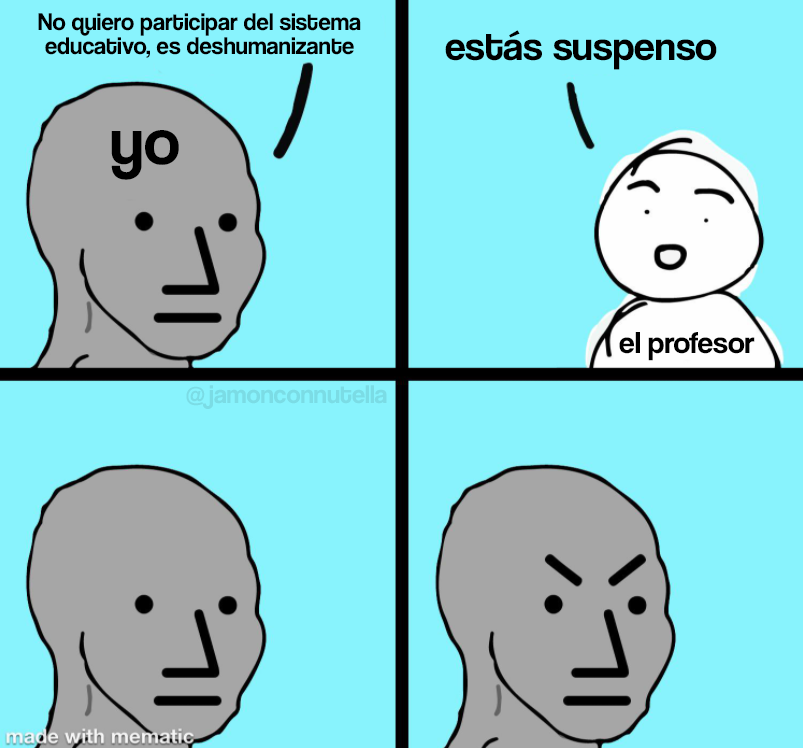
<style>
.page{position:relative;width:803px;height:748px;background:#88f3fd}
.page>*{position:absolute;margin:0}
.t1{font:24.6px "CoolveticaRg-Regular";color:#000000}
.t2{font:41.4px "CoolveticaRg-Regular";color:#000000}
.t3{font:67.2px "CoolveticaRg-Regular";color:#000000}
.t4{font:31.2px "CoolveticaRg-Regular";color:#000000}
.t5{font:26.2px "CoolveticaRg-Regular";color:#7bdce5}
</style>
<div class="page">
<p class="t1" style="left:38px;top:13px;width:323px;height:45px;text-align:center">No quiero participar del sistema<br>educativo, es deshumanizante</p>
<p class="t2" style="left:445px;top:30px;width:272px;height:40px">estás suspenso</p>
<p class="t3" style="left:111px;top:130px;width:68px;height:50px">yo</p>
<p class="t4" style="left:619px;top:332px;width:136px;height:29px">el profesor</p>
<p class="t5" style="left:186px;top:385px;width:201px;height:24px">@jamonconnutella</p>
</div>
